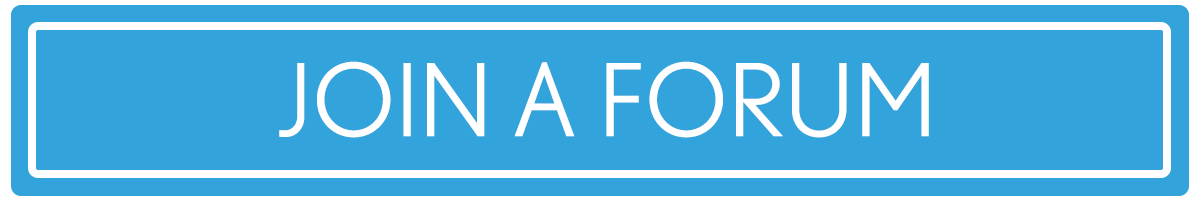
<style>
.page{position:relative;width:1200px;height:200px;background:#33a3db}
.page>*{position:absolute;margin:0}
.t1{font:100px "Nobel-Book";letter-spacing:0.01em;color:#ffffff}
</style>
<div class="page">
<p class="t1" style="left:279px;top:61px;width:650px;height:77px">JOIN A FORUM</p>
</div>
